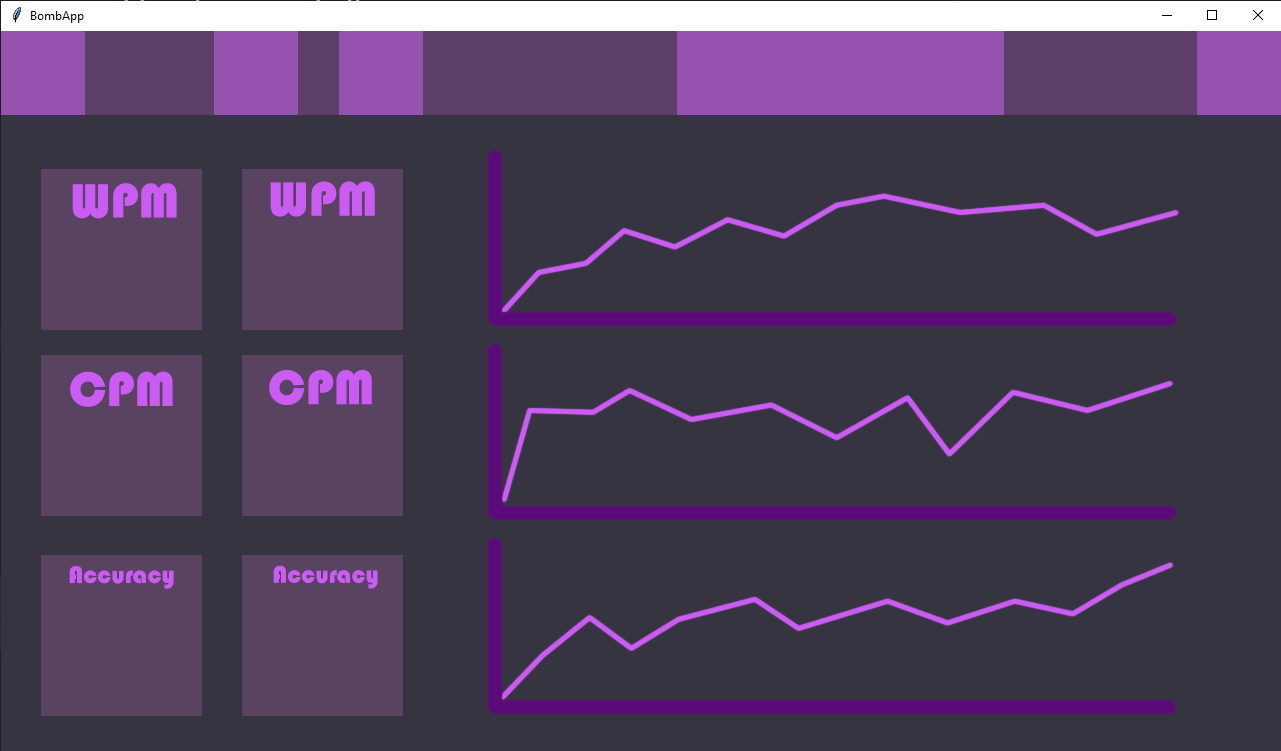
<style>
.page{position:relative;width:1281px;height:751px;background:#373441}
.page>*{position:absolute;margin:0}
.t1{font:50px "Bauhaus93";color:#ca5cf3}
.t2{font:25px "Bauhaus93";color:#ca5cf3}
</style>
<div class="page">
<p class="t1" style="left:72px;top:183px;width:105px;height:36px">WPM</p>
<p class="t1" style="left:270px;top:181px;width:105px;height:36px">WPM</p>
<p class="t1" style="left:70px;top:371px;width:103px;height:36px">CPM</p>
<p class="t1" style="left:269px;top:370px;width:103px;height:35px">CPM</p>
<p class="t2" style="left:69px;top:566px;width:105px;height:23px">Accuracy</p>
<p class="t2" style="left:273px;top:565px;width:105px;height:24px">Accuracy</p>
</div>
